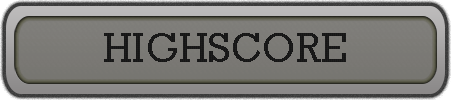
<style>
.page{position:relative;width:451px;height:100px}
.page>*{position:absolute;margin:0}
.t1{font:41.7px "Rockwell";color:#171717}
</style>
<div class="page">
<p class="t1" style="left:104px;top:33px;width:242px;height:29px">HIGHSCORE</p>
</div>
